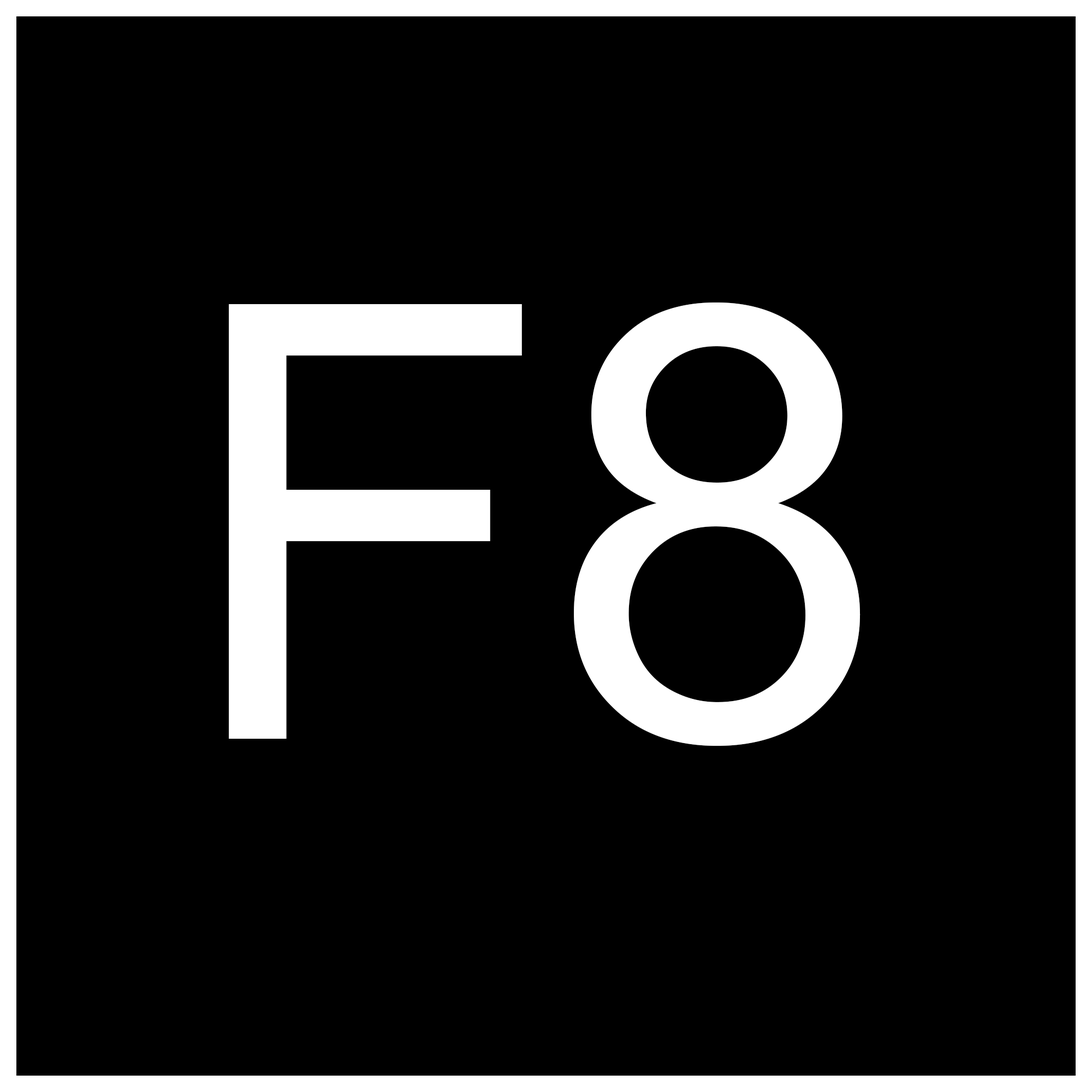
<style>
.page{position:relative;width:1092px;height:1092px;background:#000000}
.page>*{position:absolute;margin:0}
.t1{font:606.7px "ArialMT";color:#ffffff}
</style>
<div class="page">
<p class="t1" style="left:229px;top:302px;width:631px;height:444px">F8</p>
</div>
